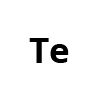
<style>
.page{position:relative;width:100px;height:100px;background:#ffffff}
.page>*{position:absolute;margin:0}
.t1{font:35px "OpenSans-Bold";color:#000000}
</style>
<div class="page">
<p class="t1" style="left:29px;top:38px;width:40px;height:25px">Te</p>
</div>
